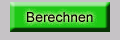
<style>
.page{position:relative;width:120px;height:40px;background:#c6c3c6}
.page>*{position:absolute;margin:0}
.t1{font:14px "ArialMT";color:#000000}
</style>
<div class="page">
<p class="t1" style="left:27px;top:12px;width:66px;height:10px">Berechnen</p>
</div>
